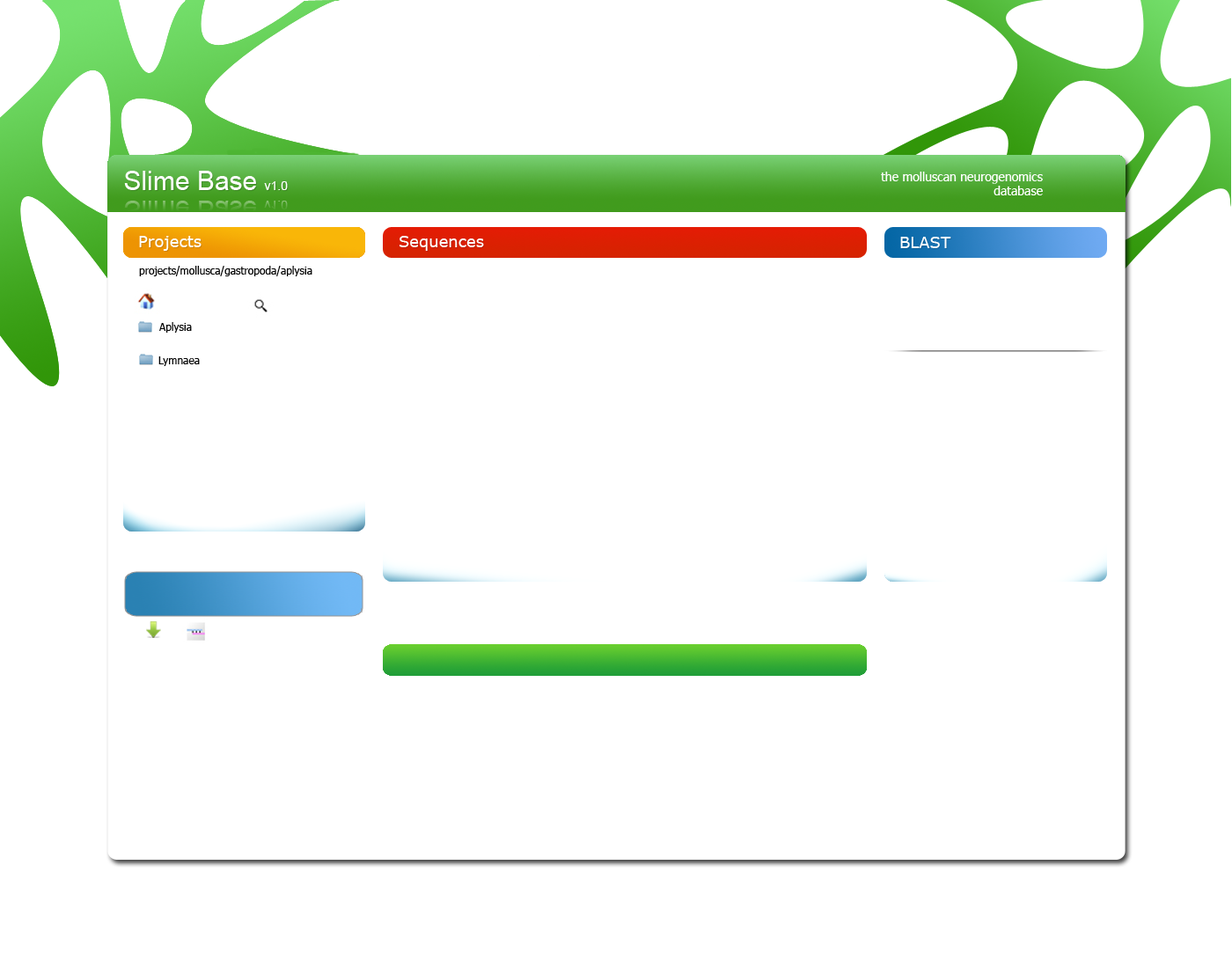
<style>
.page{position:relative;width:1232px;height:968px;background:#ffffff}
.page>*{position:absolute;margin:0}
.t1{font:12.3px "Tahoma";color:#ffffff}
.t2{font:15.8px "Verdana";color:#ffffff}
.t3{font:10.6px "Tahoma";color:#000000}
</style>
<div class="page">
<p class="t1" style="left:881px;top:172px;width:162px;height:23px;text-align:right">the molluscan neurogenomics<br>database</p>
<p class="t2" style="left:139px;top:236px;width:63px;height:15px">Projects</p>
<p class="t2" style="left:399px;top:236px;width:85px;height:15px">Sequences</p>
<p class="t2" style="left:900px;top:237px;width:51px;height:11px">BLAST</p>
<p class="t3" style="left:139px;top:266px;width:173px;height:10px">projects/mollusca/gastropoda/aplysia</p>
<p class="t3" style="left:159px;top:322px;width:33px;height:11px">Aplysia</p>
<p class="t3" style="left:158px;top:356px;width:42px;height:10px">Lymnaea</p>
</div>
